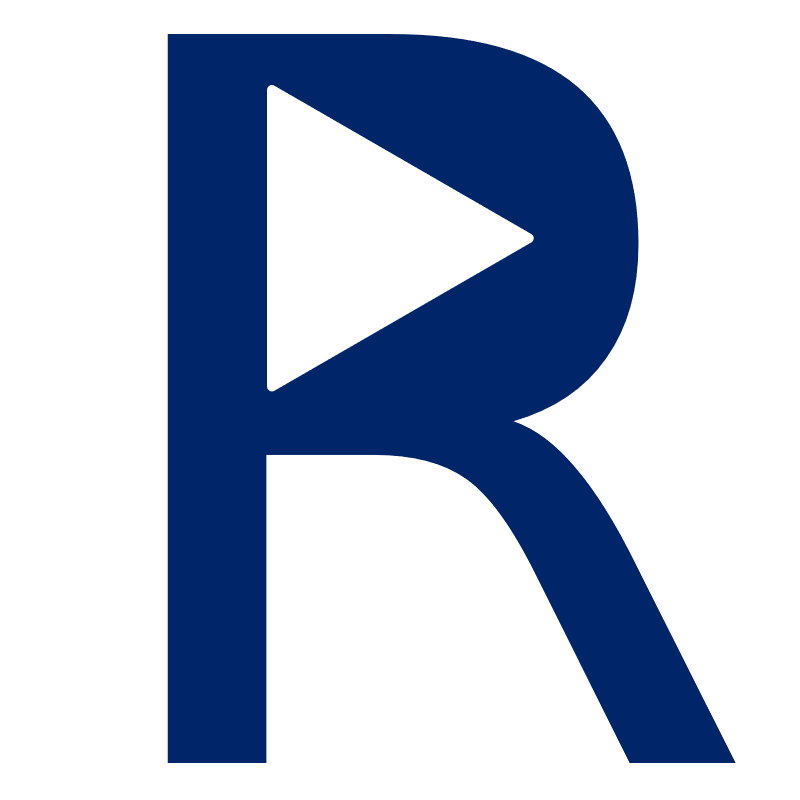
<style>
.page{position:relative;width:800px;height:800px;background:#ffffff}
.page>*{position:absolute;margin:0}
.t1{font:1000px "DejaVuSans";color:#002568}
</style>
<div class="page">
<p class="t1" style="left:167px;top:33px;width:569px;height:730px">R</p>
</div>
